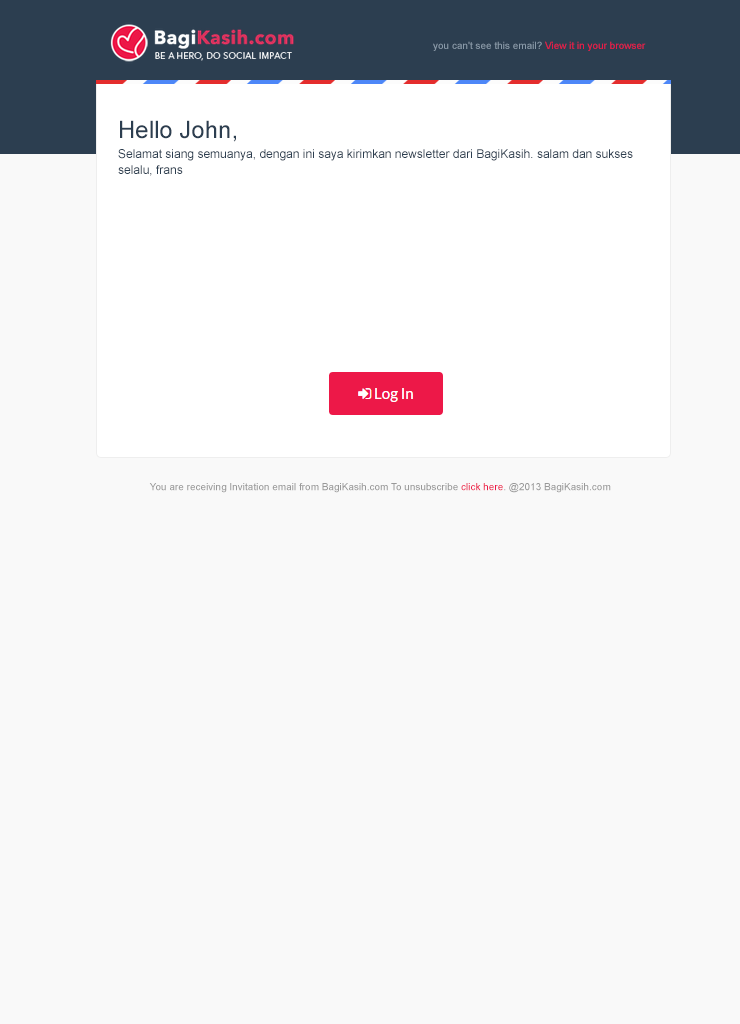
<style>
.page{position:relative;width:740px;height:1024px;background:#f9f9f9}
.page>*{position:absolute;margin:0}
.t1{font:10px "ArialMT";color:#8999a8}
.t2{font:10px "ArialMT";color:#ed1847}
.t3{font:12px/20px "ArialMT";color:#2c3e50}
.t4{font:24px/20px "ArialMT";color:#2c3e50}
.t5{font:12px/16px "ArialMT";color:#2c3e50}
.t6{font:10px "ArialMT";color:#999999}
.t7{font:10px "ArialMT";color:#ed1848}
</style>
<div class="page">
<p class="t1" style="left:433px;top:41px;width:213px;height:10px">you can't see this email? <span class="t2">View it in your browser</span></p>
<p class="t3" style="left:118px;top:120px;width:515px;height:56px"><span class="t4">Hello John,<br></span>Selamat siang semuanya, dengan ini saya kirimkan newsletter dari BagiKasih. salam dan sukses<br><span class="t5">selalu, frans</span></p>
<p class="t6" style="left:149px;top:483px;width:462px;height:10px">You are receiving Invitation email from BagiKasih.com To unsubscribe <span class="t7">click here</span>. @2013 BagiKasih.com</p>
</div>
